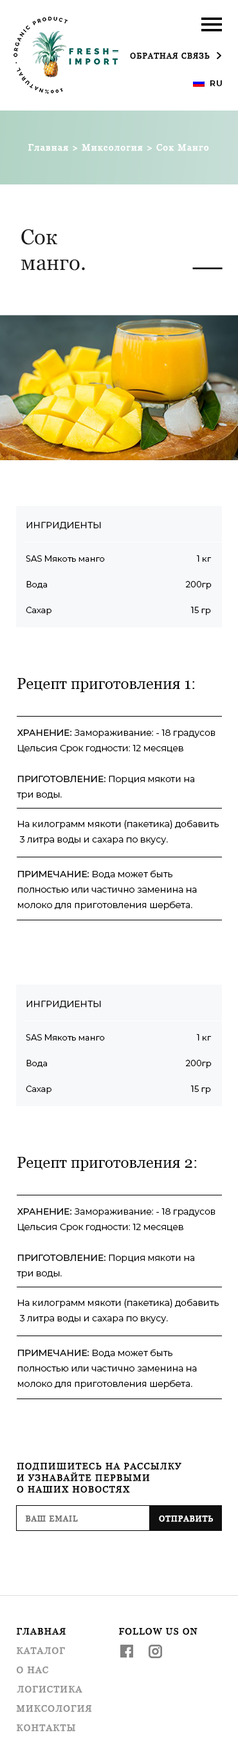
<style>
.page{position:relative;width:238px;height:1761px;background:#ffffff}
.page>*{position:absolute;margin:0}
.t1{font:7.7px "Georgia";letter-spacing:0.075em;color:#000000;text-transform:uppercase;font-weight:bold}
.t2{font:7.7px "Montserrat-Medium";letter-spacing:0.075em;color:#000000;text-transform:uppercase;font-weight:bold}
.t3{font:9px "Georgia";letter-spacing:0.075em;color:#ffffff;font-weight:bold}
.t4{font:21.2px "Georgia";color:#1a1a1d}
.t5{font:9px "Montserrat-Regular";color:#000000;text-transform:uppercase}
.t6{font:8.4px "Montserrat-Regular";color:#000000}
.t7{font:8.4px "Montserrat-Regular";color:#010101}
.t8{font:15.4px "Georgia";color:#000000}
.t9{font:9px/15.4px "Montserrat-Regular";color:#000000}
.t10{font:9px/15.4px "Montserrat-Medium";color:#000000;text-transform:uppercase}
.t11{font:9px/11.6px "Georgia";letter-spacing:0.075em;color:#000000;text-transform:uppercase;font-weight:bold}
.t12{font:7.7px "Georgia";letter-spacing:0.075em;color:#6e6e6e;text-transform:uppercase;font-weight:bold}
.t13{font:7.7px "Georgia";letter-spacing:0.075em;color:#ffffff;text-transform:uppercase;font-weight:bold}
.t14{font:9px "Georgia";letter-spacing:0.075em;color:#000000;text-transform:uppercase;font-weight:bold}
.t15{font:9px "Georgia";letter-spacing:0.075em;color:#929292;text-transform:uppercase;font-weight:bold}
</style>
<div class="page">
<p class="t1" style="left:130px;top:53px;width:80px;height:6px">обратная связь</p>
<p class="t2" style="left:210px;top:80px;width:12px;height:7px">Ru</p>
<p class="t3" style="left:28px;top:144px;width:181px;height:7px">Главная &gt; Миксология &gt; Сок Манго</p>
<p class="t4" style="left:21px;top:229px;width:64px;height:42px">Сок <br>манго.</p>
<p class="t5" style="left:26px;top:522px;width:75px;height:8px">Ингридиенты</p>
<p class="t6" style="left:26px;top:555px;width:79px;height:7px">SAS Мякоть манго</p>
<p class="t7" style="left:196px;top:555px;width:16px;height:7px">1 кг</p>
<p class="t6" style="left:26px;top:581px;width:21px;height:8px">Вода</p>
<p class="t6" style="left:185px;top:581px;width:27px;height:9px">200гр</p>
<p class="t6" style="left:26px;top:607px;width:25px;height:8px">Сахар</p>
<p class="t6" style="left:190px;top:607px;width:21px;height:8px">15 гр</p>
<p class="t8" style="left:17px;top:678px;width:178px;height:14px">Рецепт приготовления 1:</p>
<p class="t9" style="left:17px;top:730px;width:198px;height:70px"><span class="t10">Хранение: </span>Замораживание: - 18 градусов <br>Цельсия Срок годности: 12 месяцев<br><br><span class="t10">Приготовление: </span>Порция мякоти на <br>три воды.</p>
<p class="t9" style="left:18px;top:820px;width:201px;height:25px">На килограмм мякоти (пакетика) добавить<br> 3 литра воды и сахара по вкусу.</p>
<p class="t9" style="left:18px;top:870px;width:179px;height:40px"><span class="t10">Примечание:</span> Вода может быть <br>полностью или частично заменина на <br>молоко для приготовления шербета.</p>
<p class="t5" style="left:26px;top:1001px;width:75px;height:8px">Ингридиенты</p>
<p class="t6" style="left:26px;top:1034px;width:79px;height:7px">SAS Мякоть манго</p>
<p class="t7" style="left:196px;top:1034px;width:16px;height:7px">1 кг</p>
<p class="t6" style="left:26px;top:1060px;width:21px;height:8px">Вода</p>
<p class="t6" style="left:185px;top:1060px;width:27px;height:8px">200гр</p>
<p class="t6" style="left:26px;top:1086px;width:25px;height:8px">Сахар</p>
<p class="t6" style="left:190px;top:1086px;width:21px;height:8px">15 гр</p>
<p class="t8" style="left:17px;top:1157px;width:180px;height:14px">Рецепт приготовления 2:</p>
<p class="t9" style="left:17px;top:1209px;width:198px;height:70px"><span class="t10">Хранение: </span>Замораживание: - 18 градусов <br>Цельсия Срок годности: 12 месяцев<br><br><span class="t10">Приготовление: </span>Порция мякоти на <br>три воды.</p>
<p class="t9" style="left:18px;top:1299px;width:201px;height:25px">На килограмм мякоти (пакетика) добавить<br> 3 литра воды и сахара по вкусу.</p>
<p class="t9" style="left:18px;top:1349px;width:179px;height:40px"><span class="t10">Примечание:</span> Вода может быть <br>полностью или частично заменина на <br>молоко для приготовления шербета.</p>
<p class="t11" style="left:17px;top:1463px;width:164px;height:30px">ПОДПИШИТЕСЬ НА РАССЫЛКУ <br>И УЗНАВАЙТЕ ПЕРВЫМИ <br>О НАШИХ НОВОСТЯХ</p>
<p class="t12" style="left:25px;top:1516px;width:53px;height:6px">ВАШ email</p>
<p class="t13" style="left:159px;top:1516px;width:54px;height:6px">ОТПРАВИТЬ</p>
<p class="t14" style="left:17px;top:1628px;width:49px;height:7px">гЛАВНАЯ</p>
<p class="t14" style="left:119px;top:1628px;width:78px;height:7px">follow us on</p>
<p class="t15" style="left:17px;top:1648px;width:48px;height:7px">КАТАЛОГ</p>
<p class="t15" style="left:16px;top:1667px;width:33px;height:7px">О НАС</p>
<p class="t15" style="left:17px;top:1686px;width:65px;height:7px">логистика</p>
<p class="t15" style="left:16px;top:1706px;width:76px;height:7px">миксология</p>
<p class="t15" style="left:17px;top:1725px;width:58px;height:7px">контакты</p>
</div>
